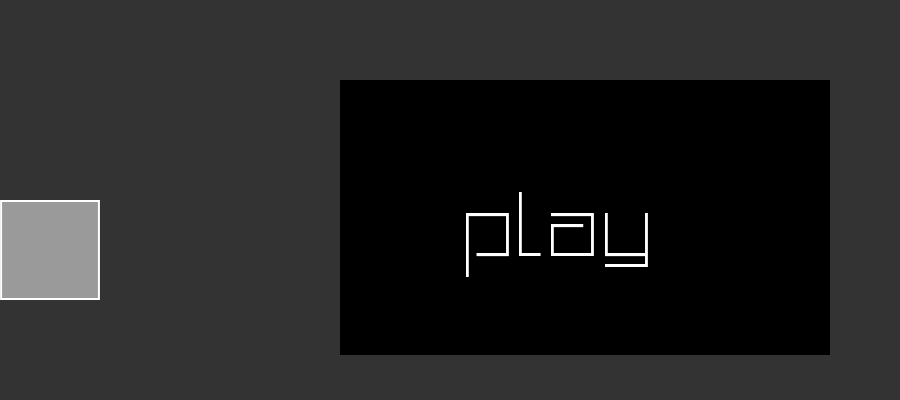
<style>
.page{position:relative;width:900px;height:400px;background:#333333}
.page>*{position:absolute;margin:0}
.t1{font:107.2px "SquaredDisplay";color:#ffffff}
</style>
<div class="page">
<p class="t1" style="left:466px;top:192px;width:182px;height:85px">PLAY</p>
</div>
